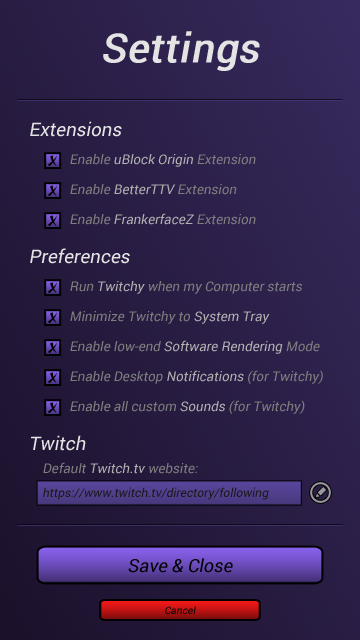
<style>
.page{position:relative;width:360px;height:640px}
.page>*{position:absolute;margin:0}
.t1{font:40px "Roboto-Regular";color:#e4e4e4;font-weight:bold;font-style:italic}
.t2{font:18.7px "Roboto-Regular";color:#e4e4e4;font-style:italic}
.t3{font:13.3px "JingJing";color:#000000;font-style:italic}
.t4{font:13.3px "Roboto-Regular";color:#b2b2b2;font-style:italic}
.t5{font:13.3px "Roboto-Regular";color:#7f7f7f;font-style:italic}
.t6{font:12px "Roboto-Regular";color:#191919;font-style:italic}
.t7{font:18px "Roboto-Regular";color:#000000;font-style:italic}
.t8{font:10.1px "Roboto-Regular";color:#000000;font-style:italic}
</style>
<div class="page">
<p class="t1" style="left:103px;top:31px;width:157px;height:40px">Settings</p>
<p class="t2" style="left:30px;top:121px;width:92px;height:16px">Extensions</p>
<p class="t3" style="left:48px;top:155px;width:9px;height:12px">x</p>
<p class="t4" style="left:70px;top:154px;width:186px;height:13px"><span class="t5">Enable </span>uBlock Origin<span class="t5"> Extension</span></p>
<p class="t3" style="left:48px;top:185px;width:9px;height:12px">x</p>
<p class="t4" style="left:70px;top:184px;width:167px;height:11px"><span class="t5">Enable </span>BetterTTV<span class="t5"> Extension</span></p>
<p class="t3" style="left:48px;top:215px;width:9px;height:12px">x</p>
<p class="t4" style="left:70px;top:213px;width:186px;height:12px"><span class="t5">Enable </span>FrankerfaceZ<span class="t5"> Extension</span></p>
<p class="t2" style="left:30px;top:248px;width:100px;height:16px">Preferences</p>
<p class="t5" style="left:70px;top:281px;width:232px;height:13px">Run <span class="t4">Twitchy</span> when my Computer starts</p>
<p class="t3" style="left:48px;top:282px;width:9px;height:12px">x</p>
<p class="t3" style="left:48px;top:312px;width:9px;height:12px">x</p>
<p class="t4" style="left:70px;top:311px;width:200px;height:13px"><span class="t5">Minimize </span><span class="t5">Twitchy</span><span class="t5"> to </span>System Tray</p>
<p class="t3" style="left:48px;top:342px;width:9px;height:12px">x</p>
<p class="t4" style="left:70px;top:340px;width:250px;height:14px"><span class="t5">Enable low-end </span>Software Rendering<span class="t5"> Mode</span></p>
<p class="t3" style="left:48px;top:372px;width:9px;height:12px">x</p>
<p class="t5" style="left:70px;top:370px;width:253px;height:14px">Enable Desktop <span class="t4">Notification</span><span class="t4">s </span>(for Twitchy)</p>
<p class="t5" style="left:70px;top:400px;width:235px;height:14px">Enable all custom <span class="t4">Sounds </span>(for Twitchy)</p>
<p class="t3" style="left:48px;top:402px;width:9px;height:12px">x</p>
<p class="t2" style="left:31px;top:435px;width:55px;height:16px">Twitch</p>
<p class="t4" style="left:43px;top:462px;width:155px;height:12px"><span class="t5">Default </span>Twitch.tv<span class="t5"> website:</span></p>
<p class="t6" style="left:43px;top:487px;width:226px;height:13px">https://www.twitch.tv/directory/following</p>
<p class="t7" style="left:128px;top:558px;width:105px;height:15px">Save &amp; Close</p>
<p class="t8" style="left:165px;top:606px;width:31px;height:8px">Cancel</p>
</div>
